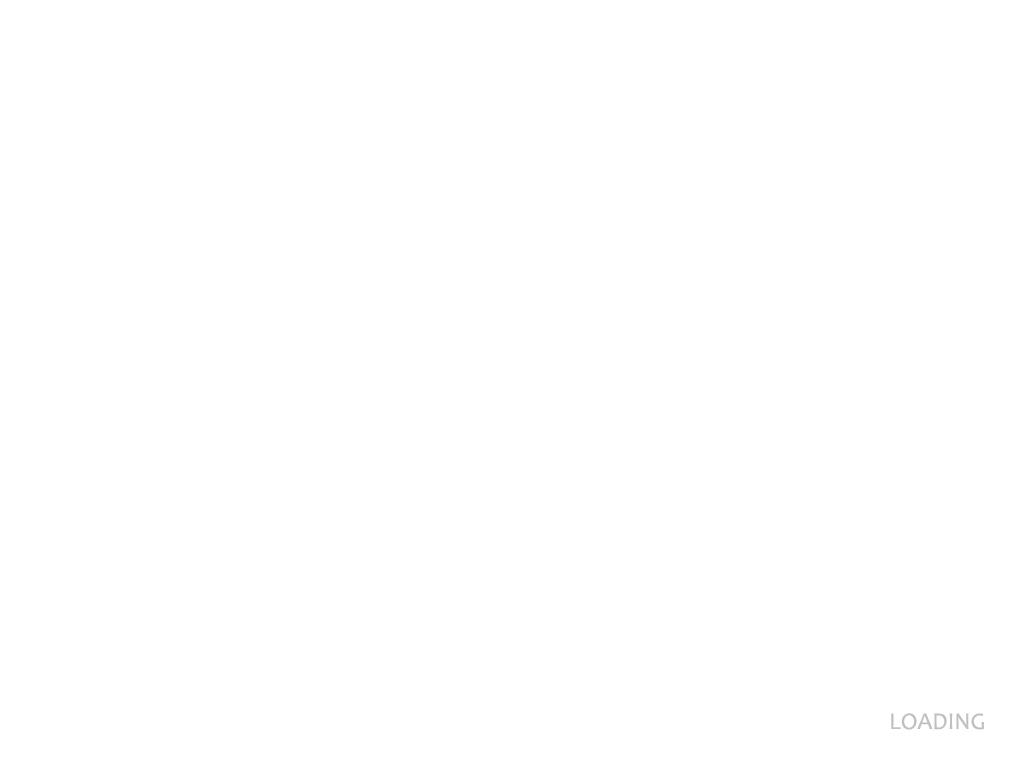
<style>
.page{position:relative;width:1024px;height:768px;background:#ffffff}
.page>*{position:absolute;margin:0}
.t1{font:24px "Candara";color:#c0c0c0}
</style>
<div class="page">
<p class="t1" style="left:891px;top:713px;width:93px;height:17px">LOADING</p>
</div>
